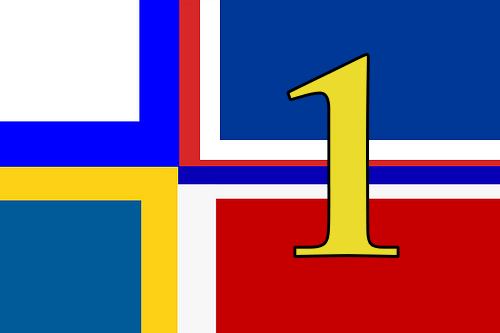
<style>
.page{position:relative;width:500px;height:333px}
.page>*{position:absolute;margin:0}
.t1{font:300px "ACaslonPro-Bold";color:#ebdb2c}
</style>
<div class="page">
<p class="t1" style="left:286px;top:53px;width:114px;height:205px">1</p>
</div>
